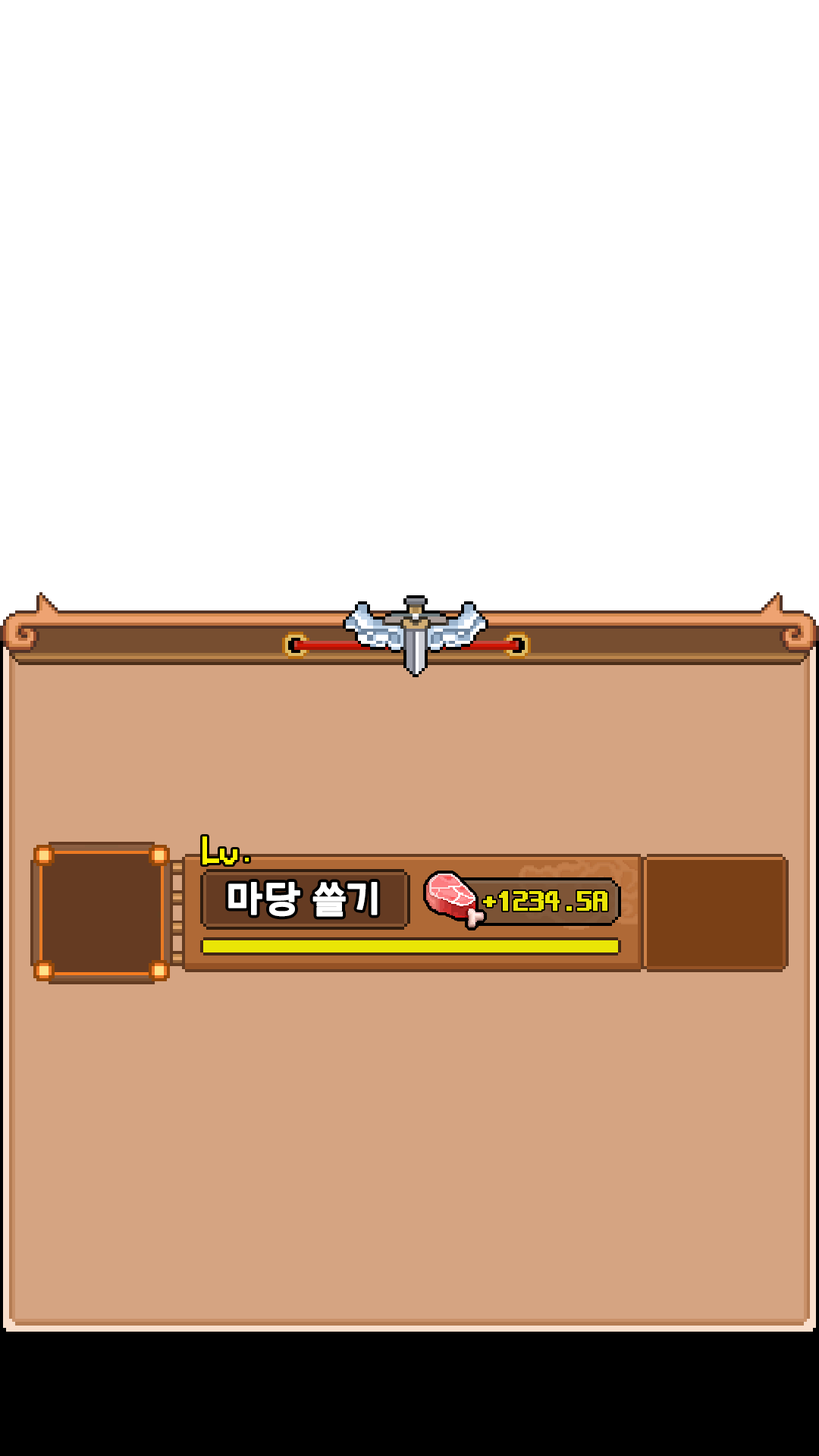
<style>
.page{position:relative;width:819px;height:1456px;background:#ffffff}
.page>*{position:absolute;margin:0}
.t1{font:37.9px "Arita-dotum-Bold_OTF";color:#ffffff;font-weight:bold}
.t2{font:30.3px "NeoDunggeunmo-Regular";color:#eae506;font-weight:bold}
</style>
<div class="page">
<p class="t1" style="left:228px;top:882px;width:150px;height:35px">마당 쓸기</p>
<p class="t2" style="left:483px;top:891px;width:124px;height:20px">+1234.5A</p>
</div>
